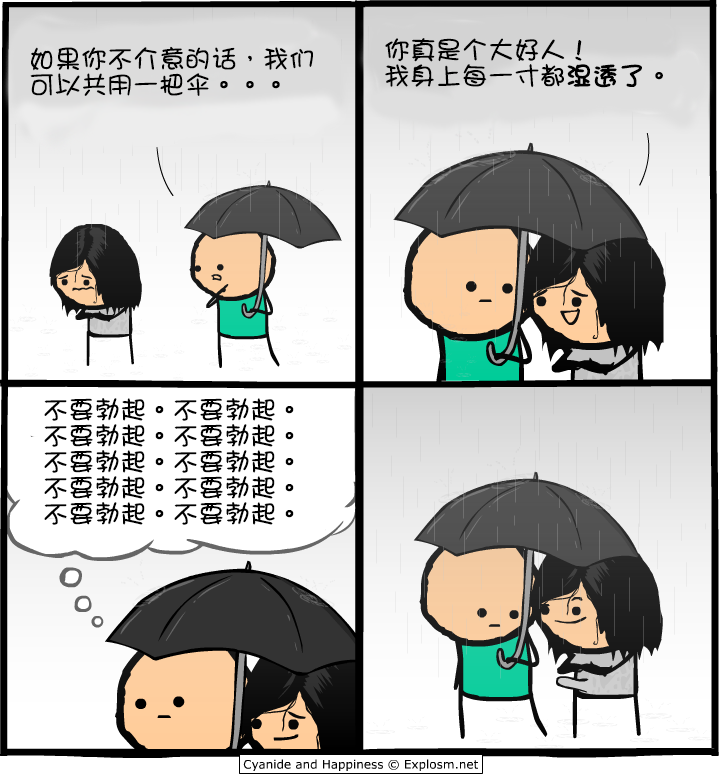
<style>
.page{position:relative;width:720px;height:775px}
.page>*{position:absolute;margin:0}
.t1{font:26px/26px "DFGirl";color:#000000}
.t2{font:26px/26px "DFGirl";color:#000000;font-weight:bold}
</style>
<div class="page">
<p class="t1" style="left:385px;top:38px;width:278px;height:50px">你真是个大好人！<br>我身上每一寸都<span class="t2">湿透了</span>。</p>
<p class="t1" style="left:30px;top:46px;width:283px;height:50px">如果你不介意的话，我们<br>可以共用一把伞。。。</p>
<p class="t1" style="left:44px;top:398px;width:250px;height:127px">不要勃起。不要勃起。<br>不要勃起。不要勃起。<br>不要勃起。不要勃起。<br>不要勃起。不要勃起。<br>不要勃起。不要勃起。</p>
</div>
